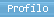
<style>
.page{position:relative;width:54px;height:17px}
.page>*{position:absolute;margin:0}
.t1{font:10.7px "Consolas";color:#ffffff}
</style>
<div class="page">
<p class="t1" style="left:8px;top:4px;width:40px;height:8px">Profilo</p>
</div>
